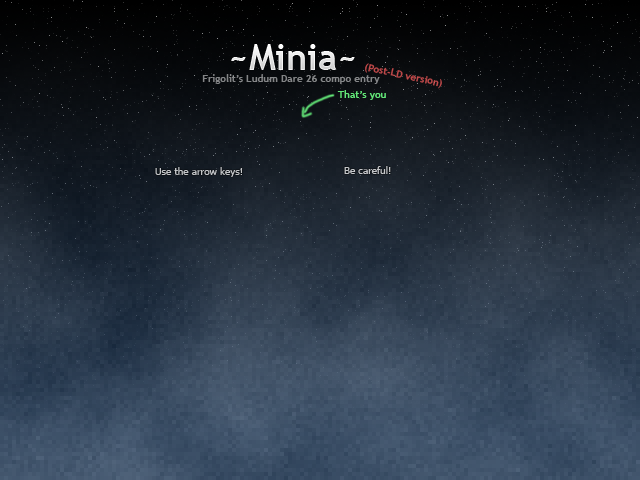
<style>
.page{position:relative;width:640px;height:480px}
.page>*{position:absolute;margin:0}
.t1{font:36px "TrebuchetMS-Bold";color:#ffffff}
.t2{font:10px "TrebuchetMS-Bold";color:#c24a4a}
.t3{font:10px "TrebuchetMS-Bold";color:#848587}
.t4{font:10px "TrebuchetMS-Bold";color:#62e577}
.t5{font:10px "Tahoma";color:#c4c6c8}
.t6{font:10px "Tahoma";color:#c6c7c9}
</style>
<div class="page">
<p class="t1" style="left:231px;top:44px;width:124px;height:26px">~Minia~</p>
<p class="t2" style="left:365px;top:63px;width:77px;height:26px;rotate:12deg">(Post-LD version)</p>
<p class="t3" style="left:202px;top:74px;width:178px;height:10px">Frigolit’s Ludum Dare 26 compo entry</p>
<p class="t4" style="left:337px;top:90px;width:49px;height:10px">That’s you</p>
<p class="t5" style="left:155px;top:167px;width:88px;height:10px">Use the arrow keys!</p>
<p class="t6" style="left:344px;top:166px;width:47px;height:8px">Be careful!</p>
</div>
